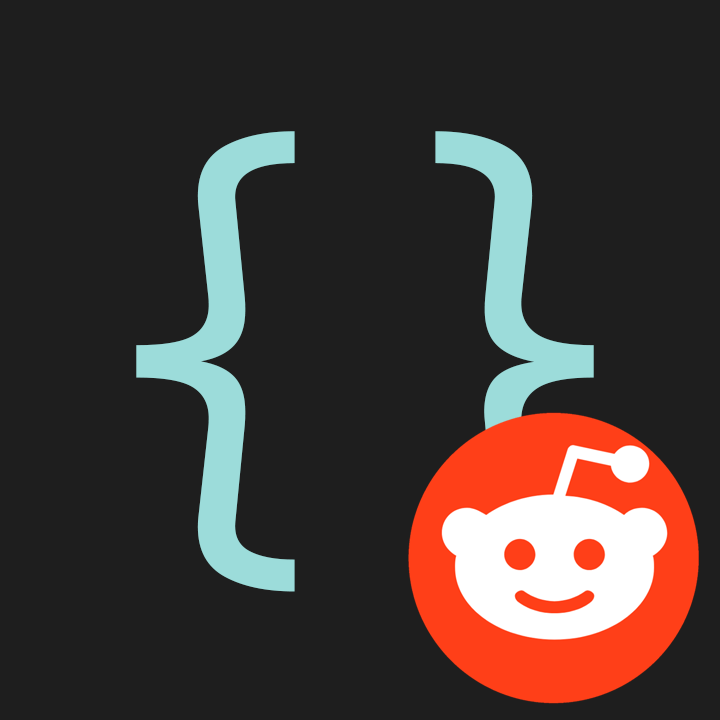
<style>
.page{position:relative;width:720px;height:720px;background:#1e1e1e}
.page>*{position:absolute;margin:0}
.t1{font:473.3px "FiraCode-Regular";color:#9cdcda}
</style>
<div class="page">
<p class="t1" style="left:136px;top:131px;width:458px;height:461px">{}</p>
</div>
